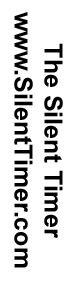
<style>
.page{position:relative;width:74px;height:285px;background:#ffffff}
.page>*{position:absolute;margin:0}
.t1{font:25px "Arial-BoldMT";color:#000000}
</style>
<div class="page">
<p class="t1" style="left:14px;top:12px;width:49px;height:256px;text-align:center;rotate:90deg">The Silent Timer<br>www.SilentTimer.com</p>
</div>
